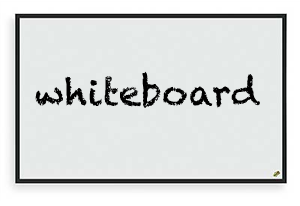
<style>
.page{position:relative;width:300px;height:206px;background:#e5e9e8}
.page>*{position:absolute;margin:0}
.t1{font:36px "Chalkduster";color:#000000}
</style>
<div class="page">
<p class="t1" style="left:35px;top:71px;width:225px;height:37px">whiteboard</p>
</div>
